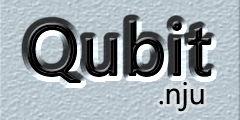
<style>
.page{position:relative;width:240px;height:120px}
.page>*{position:absolute;margin:0}
.t1{font:72px "SegoeUISymbol";color:#000000;font-weight:bold}
.t2{font:30px "SegoeUISymbol";color:#000000}
</style>
<div class="page">
<p class="t1" style="left:27px;top:20px;width:185px;height:63px">Qubit</p>
<p class="t2" style="left:159px;top:82px;width:45px;height:30px">.nju</p>
</div>
